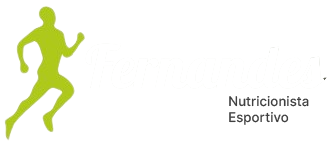
<style>
.page{position:relative;width:328px;height:143px;background:#ffffff}
.page>*{position:absolute;margin:0}
.t1{font:13.3px "Inter-Medium";color:#404040}
</style>
<div class="page">
<p class="t1" style="left:229px;top:96px;width:80px;height:29px">Nutricionista<br>Esportivo</p>
</div>
